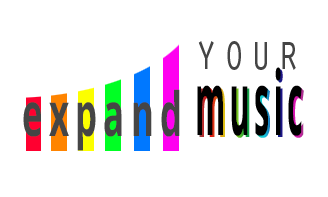
<style>
.page{position:relative;width:328px;height:197px;background:#ffffff}
.page>*{position:absolute;margin:0}
.t1{font:51px "OratorStd";letter-spacing:0.14em;color:#454545;scale:0.73 1}
.t2{font:88.7px "OpenSans-Bold";letter-spacing:0.14em;color:#000000;scale:0.35 1}
.t3{font:88.7px "OpenSans-Bold";letter-spacing:0.14em;scale:0.35 1}
.t4{font:60.9px "OpenSans-Bold";letter-spacing:0.18em;color:#454545;scale:0.57 1}
</style>
<div class="page">
<p class="t1" style="left:198px;top:41px;width:98px;height:29px">your</p>
<p class="t2" style="left:197px;top:67px;width:105px;height:69px">music</p>
<p class="t3" style="left:199px;top:69px;width:105px;height:69px">music</p>
<p class="t4" style="left:23px;top:89px;width:157px;height:62px">expand</p>
</div>
